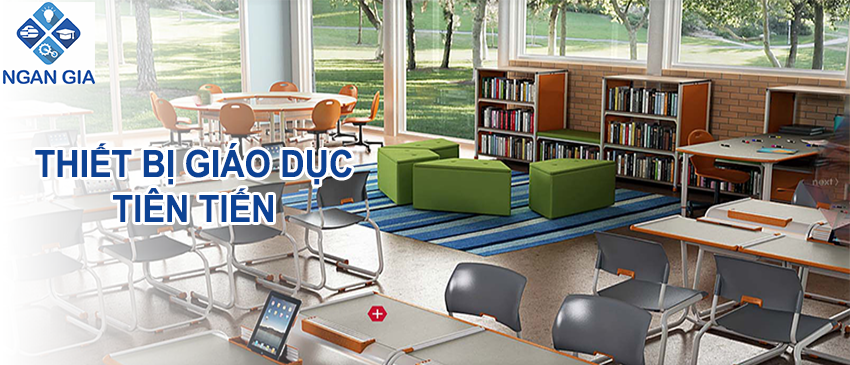
<style>
.page{position:relative;width:850px;height:365px}
.page>*{position:absolute;margin:0}
.t1{font:37.5px "Arial-BoldMT";color:#0c4294;scale:0.9 1}
</style>
<div class="page">
<p class="t1" style="left:35px;top:143px;width:317px;height:79px;text-align:center">THIẾT BỊ GIÁO DỤC<br>TIÊN TIẾN</p>
</div>
